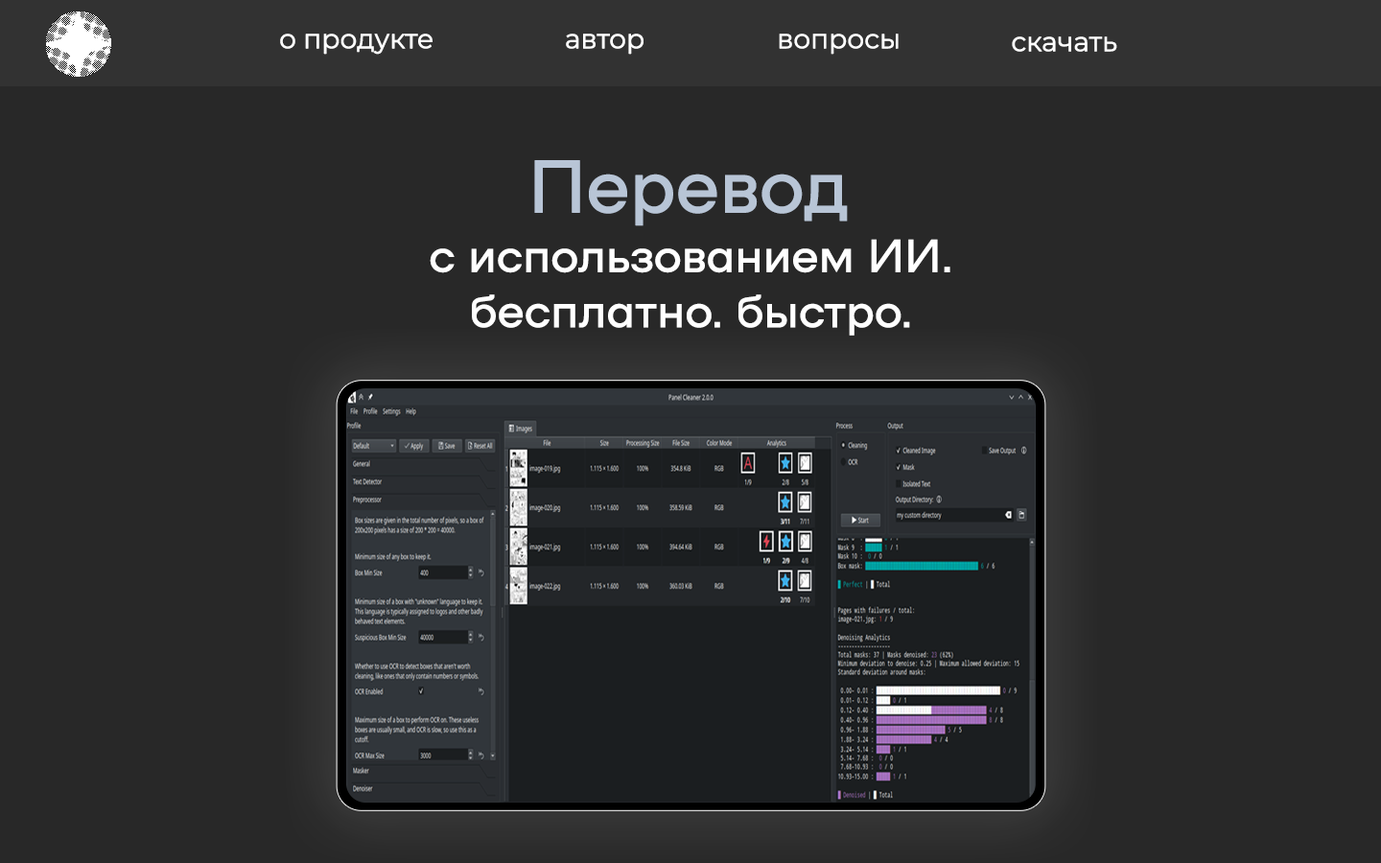
<style>
.page{position:relative;width:1381px;height:863px;background:#282828}
.page>*{position:absolute;margin:0}
.t1{font:26.9px "Montserrat-Regular";letter-spacing:-0.025em;color:#ffffff;font-weight:bold}
.t2{font:74.4px "NAMU-Pro";letter-spacing:-0.025em;color:#b8c5d6;font-weight:bold}
.t3{font:46px "NAMU-Pro";letter-spacing:-0.025em;color:#ffffff;font-weight:bold}
</style>
<div class="page">
<p class="t1" style="left:280px;top:34px;width:153px;height:21px">о продукте</p>
<p class="t1" style="left:566px;top:34px;width:78px;height:21px">автор</p>
<p class="t1" style="left:779px;top:34px;width:120px;height:21px">вопросы</p>
<p class="t1" style="left:1012px;top:36px;width:105px;height:16px">скачать</p>
<p class="t2" style="left:534px;top:160px;width:314px;height:66px">Перевод</p>
<p class="t3" style="left:430px;top:239px;width:521px;height:97px;text-align:center">с использованием ИИ.<br>бесплатно. быстро.</p>
</div>
